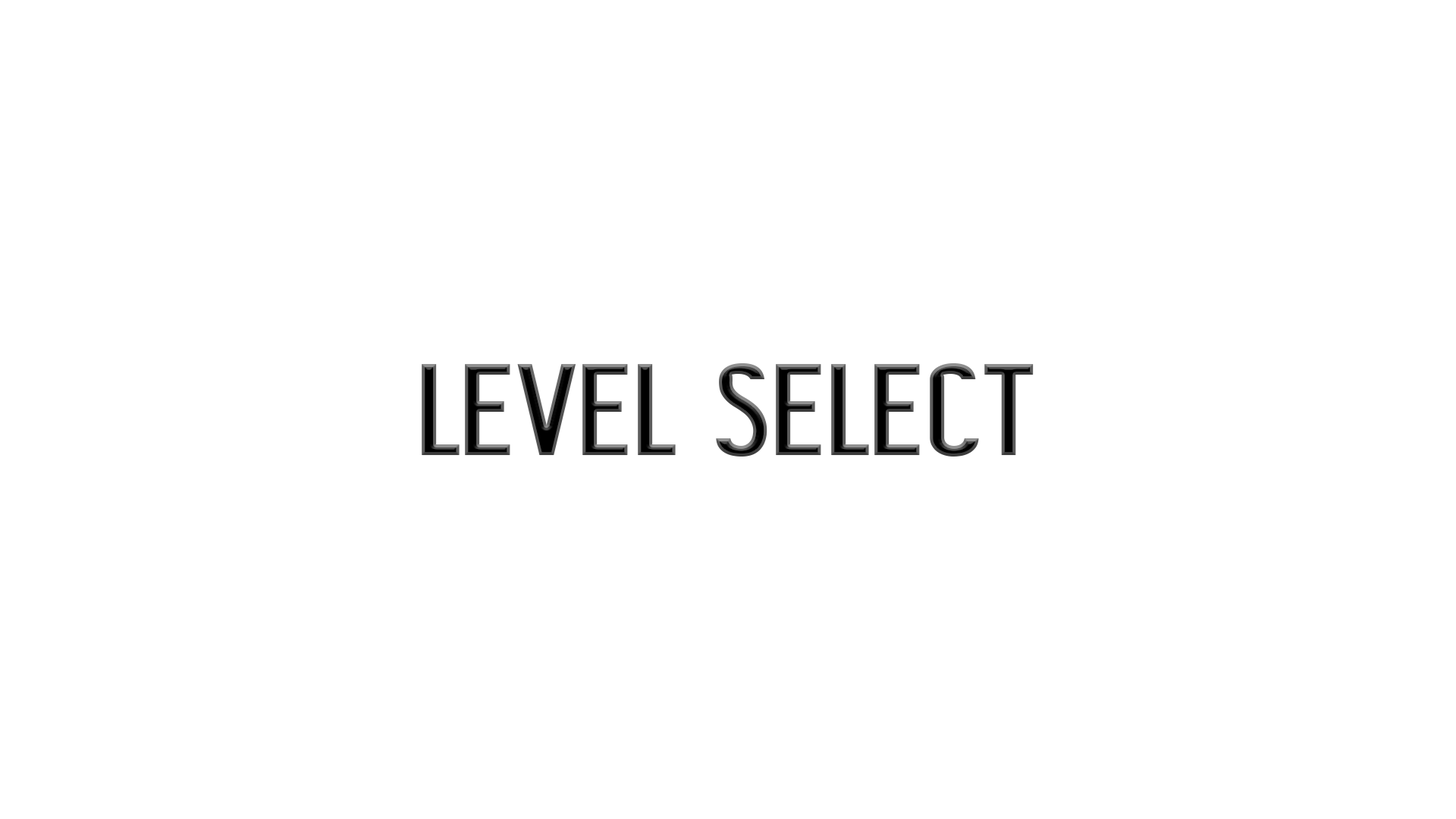
<style>
.page{position:relative;width:1456px;height:819px;background:#ffffff}
.page>*{position:absolute;margin:0}
.t1{font:122.1px "ShiftTypeBasic"}
</style>
<div class="page">
<p class="t1" style="left:422px;top:363px;width:612px;height:94px">LEVEL SELECT</p>
</div>
